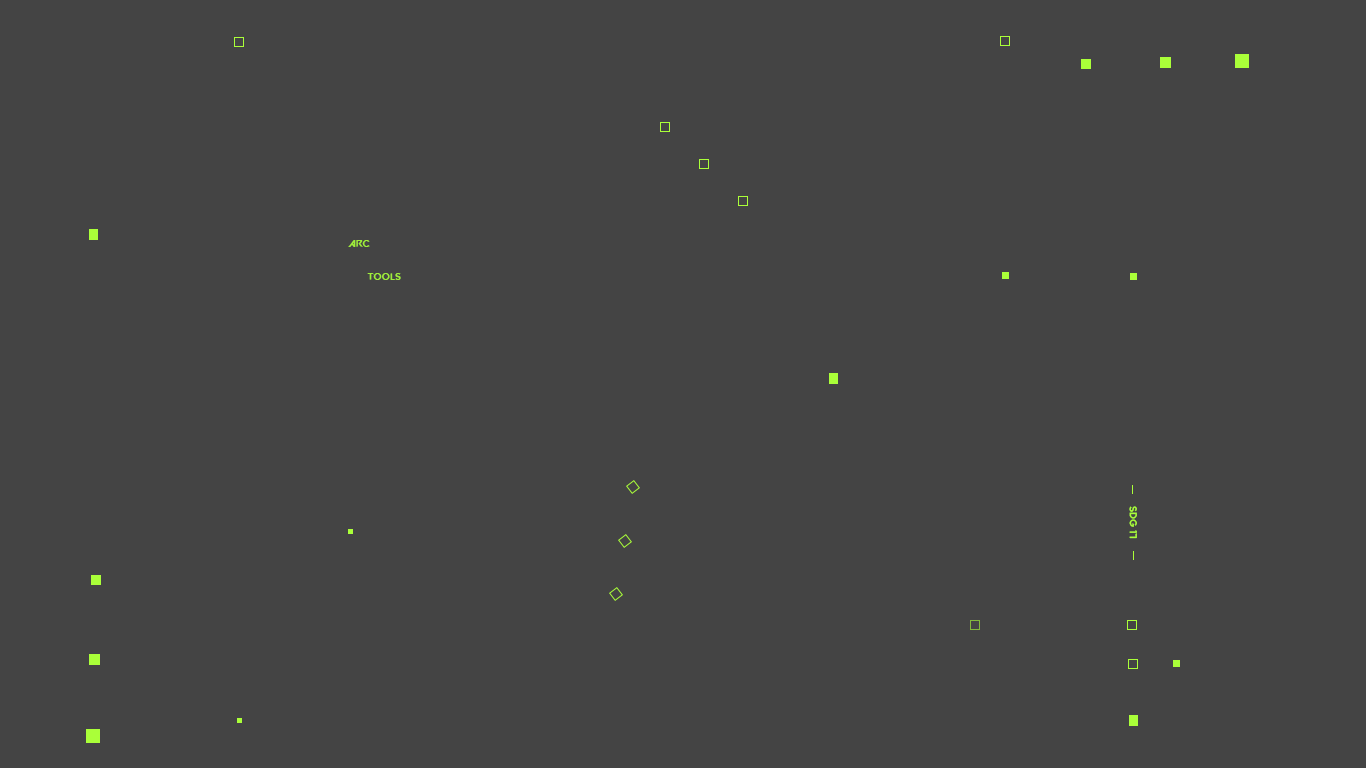
<style>
.page{position:relative;width:1366px;height:768px;background:#444444}
.page>*{position:absolute;margin:0}
.t1{font:10px "VALORANT-Regular";letter-spacing:0.005em;color:#aaff39}
.t2{font:10px "VALORANT-Regular";letter-spacing:0.01em;color:#aaff39}
</style>
<div class="page">
<p class="t1" style="left:348px;top:240px;width:22px;height:7px;opacity:0.87">ARC</p>
<p class="t2" style="left:367px;top:273px;width:34px;height:7px;opacity:0.87">Tools</p>
<p class="t1" style="left:1129px;top:506px;width:8px;height:33px;rotate:90deg">SDG 17</p>
</div>
